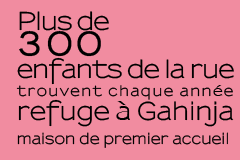
<style>
.page{position:relative;width:240px;height:160px;background:#f18ca0}
.page>*{position:absolute;margin:0}
.t1{font:14.5px/24px "Sansumi-Bold";color:#000000}
.t2{font:24px/25px "Sansumi-Bold";letter-spacing:-0.04em;color:#000000}
.t3{font:31.8px/25px "Sansumi-Bold";letter-spacing:0.12em;color:#000000;font-weight:bold;scale:0.93 1}
.t4{font:24px/23px "Sansumi-Bold";letter-spacing:-0.04em;color:#000000}
.t5{font:14px/18px "Sansumi-Bold";letter-spacing:0.1em;color:#000000}
.t6{font:24px/24px "Sansumi-Bold";letter-spacing:-0.01em;color:#000000}
</style>
<div class="page">
<p class="t1" style="left:16px;top:11px;width:218px;height:137px"><span class="t2">Plus de<br></span><span class="t3">300<br></span><span class="t4">enfants de la rue<br></span><span class="t5">trouvent chaque année<br></span><span class="t6">refuge à Gahinja<br></span>maison de premier accueil</p>
</div>
